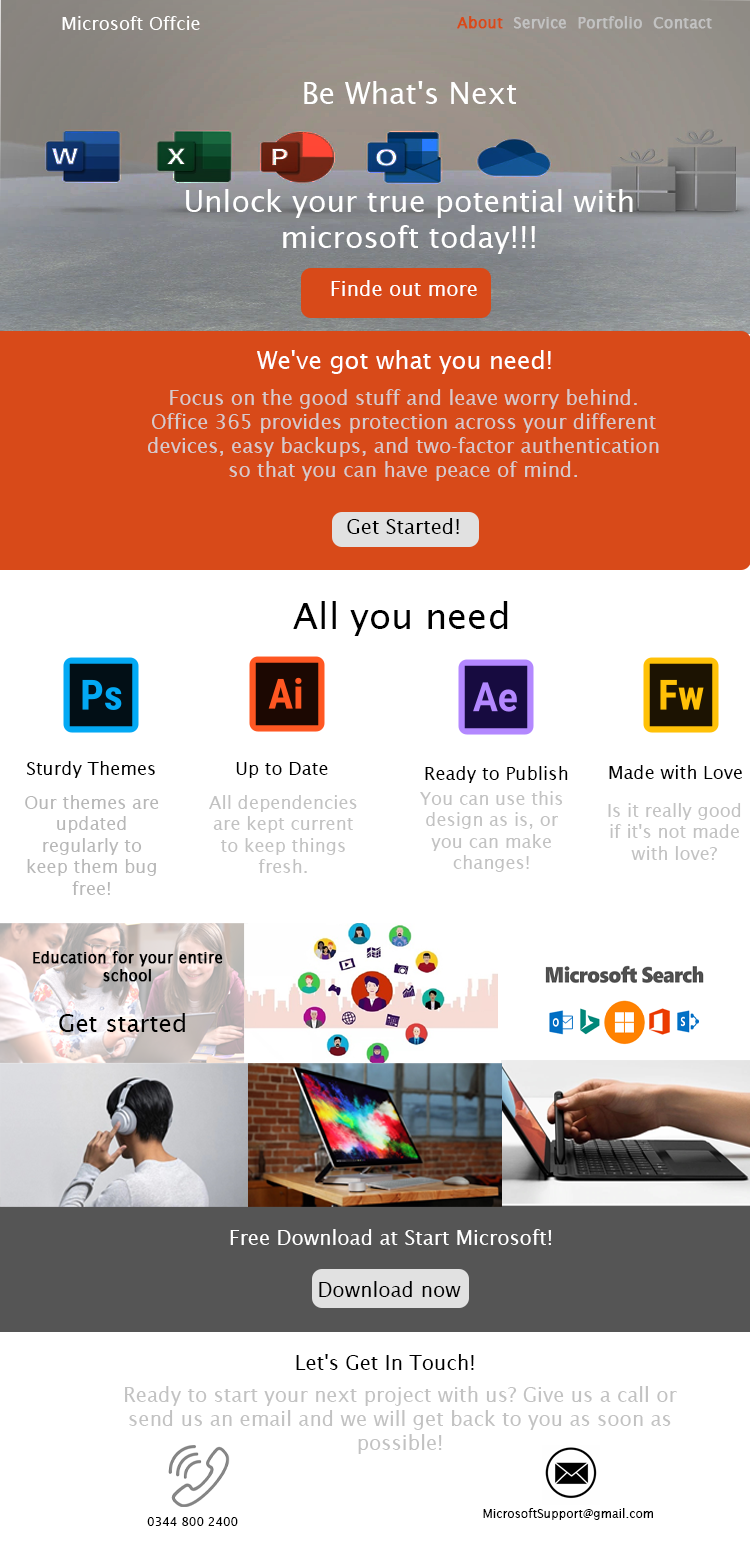
<style>
.page{position:relative;width:750px;height:1550px;background:#ffffff}
.page>*{position:absolute;margin:0}
.t1{font:18px "LucidaSans";color:#ffffff}
.t2{font:15px "LucidaSans";color:#c2c2c2;font-weight:bold}
.t3{font:15px "LucidaSans";color:#d84a19;font-weight:bold}
.t4{font:30px "LucidaSans";color:#ffffff}
.t5{font:20px "LucidaSans";color:#ffffff}
.t6{font:24px "LucidaSans";color:#ffffff}
.t7{font:20px "LucidaSans";color:#d6cbcb}
.t8{font:20px "LucidaSans";color:#000000}
.t9{font:36px "LucidaSans";color:#000000}
.t10{font:18px "LucidaSans";color:#000000}
.t11{font:18px "LucidaSans";color:#b7b7b7}
.t12{font:18px "LucidaSans";color:#c2c2c2}
.t13{font:15px "LucidaSans";color:#000000;font-weight:bold}
.t14{font:24px "LucidaSans";color:#000000}
.t15{font:20px "LucidaSans";color:#c2c2c2}
.t16{font:12px "LucidaSans";color:#000000}
</style>
<div class="page">
<p class="t1" style="left:62px;top:16px;width:138px;height:14px">Microsoft Offcie</p>
<p class="t2" style="left:457px;top:16px;width:255px;height:13px"><span class="t3">About  </span>Service  Portfolio  Contact</p>
<p class="t4" style="left:186px;top:81px;width:447px;height:173px;text-align:center">Be What's Next<br><br><br>Unlock your true potential with microsoft today!!!</p>
<p class="t5" style="left:331px;top:280px;width:146px;height:16px">Finde out more</p>
<p class="t6" style="left:257px;top:350px;width:294px;height:24px">We've got what you need!</p>
<p class="t7" style="left:148px;top:389px;width:511px;height:92px;text-align:center">Focus on the good stuff and leave worry behind. Office 365 provides protection across your different devices, easy backups, and two-factor authentication so that you can have peace of mind.</p>
<p class="t8" style="left:347px;top:518px;width:112px;height:16px">Get Started!</p>
<p class="t9" style="left:293px;top:601px;width:215px;height:35px">All you need</p>
<p class="t10" style="left:27px;top:761px;width:128px;height:17px">Sturdy Themes</p>
<p class="t10" style="left:236px;top:762px;width:92px;height:16px">Up to Date</p>
<p class="t10" style="left:425px;top:766px;width:143px;height:17px">Ready to Publish</p>
<p class="t10" style="left:609px;top:765px;width:133px;height:14px">Made with Love</p>
<p class="t11" style="left:25px;top:795px;width:134px;height:100px;text-align:center">Our themes are updated regularly to keep them bug free!</p>
<p class="t12" style="left:209px;top:795px;width:148px;height:78px;text-align:center">All dependencies are kept current to keep things fresh.</p>
<p class="t12" style="left:420px;top:791px;width:143px;height:81px;text-align:center">You can use this design as is, or you can make changes!</p>
<p class="t12" style="left:608px;top:803px;width:133px;height:57px;text-align:center">Is it really good if it's not made with love?</p>
<p class="t13" style="left:33px;top:951px;width:190px;height:31px;text-align:center">Education for your entire school</p>
<p class="t14" style="left:59px;top:1013px;width:126px;height:19px">Get started</p>
<p class="t5" style="left:230px;top:1229px;width:321px;height:16px">Free Download at Start Microsoft!</p>
<p class="t8" style="left:319px;top:1281px;width:142px;height:16px">Download now</p>
<p class="t8" style="left:296px;top:1354px;width:178px;height:16px">Let's Get In Touch!</p>
<p class="t15" style="left:125px;top:1386px;width:552px;height:68px;text-align:center">Ready to start your next project with us? Give us a call or send us an email and we will get back to you as soon as possible!</p>
<p class="t16" style="left:147px;top:1517px;width:91px;height:9px">0344 800 2400</p>
<p class="t16" style="left:483px;top:1508px;width:170px;height:12px">MicrosoftSupport@gmail.com</p>
</div>
